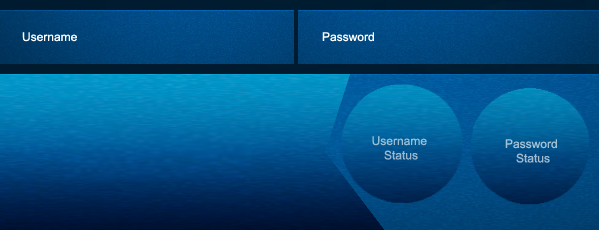
<style>
.page{position:relative;width:599px;height:230px}
.page>*{position:absolute;margin:0}
.t1{font:12px "ArialMT";color:#99bdd4}
.t2{font:12px "ArialMT";color:#a1bfd4}
</style>
<div class="page">
<p class="t1" style="left:372px;top:136px;width:55px;height:24px;text-align:center">Username <br>Status</p>
<p class="t2" style="left:505px;top:139px;width:52px;height:24px;text-align:center">Password <br>Status</p>
</div>
